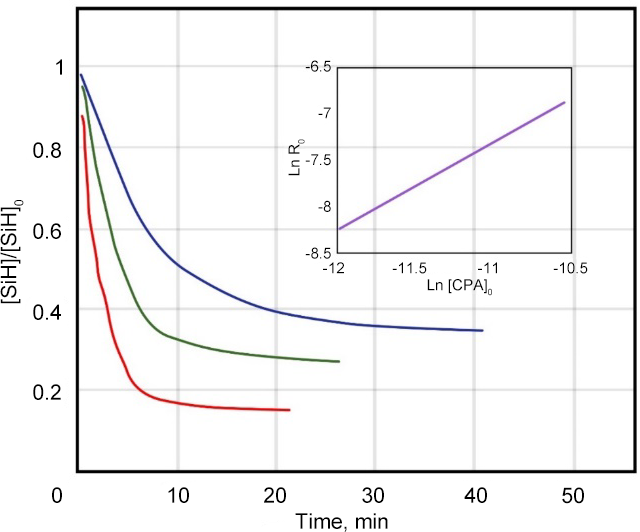
<style>
.page{position:relative;width:640px;height:532px;background:#ffffff}
.page>*{position:absolute;margin:0}
.t1{font:21.4px "ArialMT";color:#000000}
.t2{font:15.3px "ArialMT";color:#000000}
</style>
<div class="page">
<p class="t1" style="left:56px;top:59px;width:6px;height:16px">1</p>
<p class="t2" style="left:305px;top:60px;width:26px;height:199px;text-align:right">-6.5<br>-7<br>-7.5<br>-8<br>-8.5</p>
<p class="t1" style="left:33px;top:142px;width:28px;height:16px">0.8</p>
<p class="t2" style="left:288px;top:139px;width:17px;height:37px;rotate:-90deg">Ln R0</p>
<p class="t1" style="left:0px;top:200px;width:24px;height:104px;rotate:-90deg">[SiH]/[SiH]0</p>
<p class="t1" style="left:33px;top:223px;width:28px;height:16px">0.6</p>
<p class="t2" style="left:323px;top:262px;width:21px;height:12px">-12</p>
<p class="t2" style="left:392px;top:262px;width:35px;height:12px">-11.5</p>
<p class="t2" style="left:478px;top:262px;width:19px;height:12px">-11</p>
<p class="t2" style="left:553px;top:262px;width:35px;height:12px">-10.5</p>
<p class="t2" style="left:427px;top:279px;width:65px;height:17px">Ln [CPA]0</p>
<p class="t1" style="left:33px;top:304px;width:28px;height:16px">0.4</p>
<p class="t1" style="left:33px;top:384px;width:28px;height:16px">0.2</p>
<p class="t1" style="left:52px;top:487px;width:10px;height:16px">0</p>
<p class="t1" style="left:168px;top:487px;width:21px;height:16px">10</p>
<p class="t1" style="left:264px;top:487px;width:22px;height:16px">20</p>
<p class="t1" style="left:362px;top:487px;width:22px;height:16px">30</p>
<p class="t1" style="left:464px;top:487px;width:23px;height:16px">40</p>
<p class="t1" style="left:562px;top:487px;width:22px;height:17px">50</p>
<p class="t1" style="left:295px;top:513px;width:93px;height:19px">Time, min</p>
</div>
